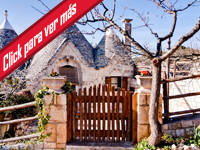
<style>
.page{position:relative;width:200px;height:150px}
.page>*{position:absolute;margin:0}
.t1{font:19.7px "AgencyFB-Bold";color:#ffffff;scale:0.74 1}
</style>
<div class="page">
<p class="t1" style="left:3px;top:3px;width:74px;height:69px;rotate:-39deg">Click para ver más</p>
</div>
